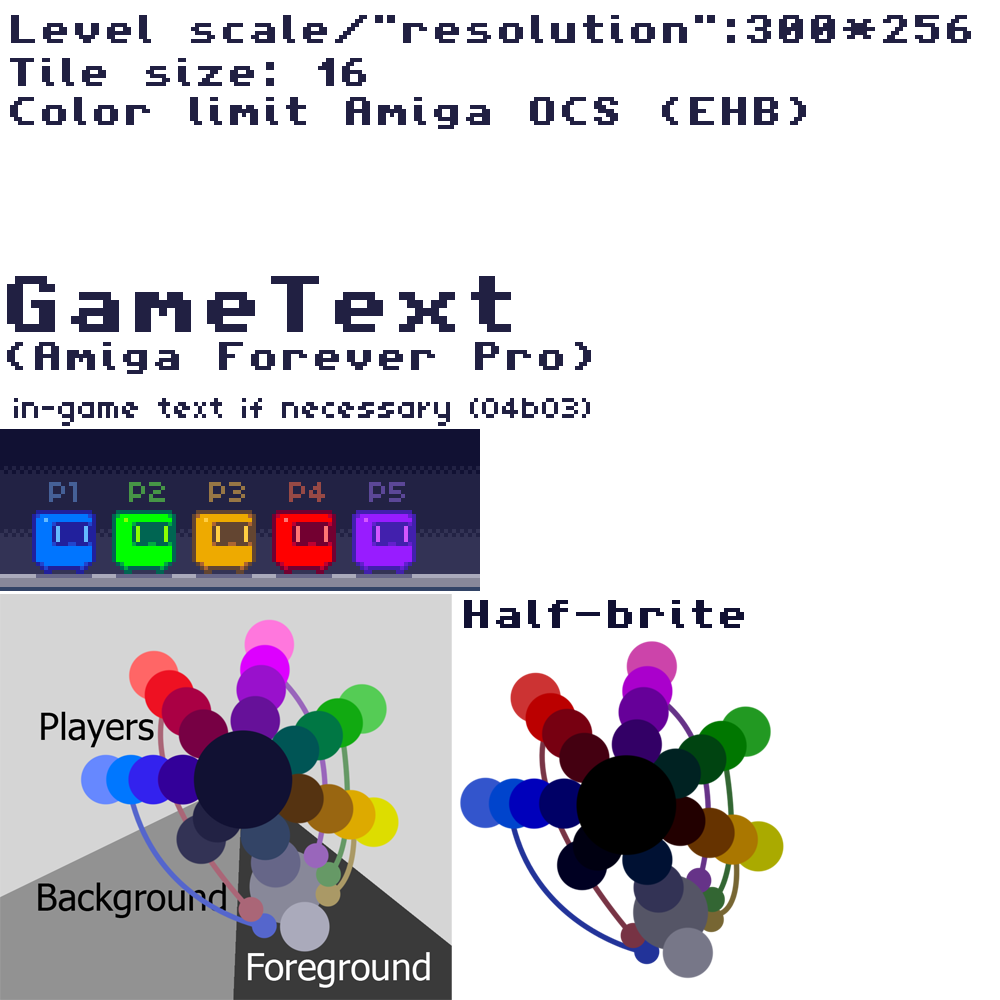
<style>
.page{position:relative;width:1000px;height:1000px;background:#ffffff}
.page>*{position:absolute;margin:0}
.t1{font:32px "AmigaForeverPro";color:#212042}
.t2{font:64px "AmigaForeverPro";color:#212042}
.t3{font:32px "04b03";color:#212042}
.t4{font:32px "04b03";color:#456097}
.t5{font:32px "04b03";color:#469546}
.t6{font:32px "04b03";color:#977645}
.t7{font:32px "04b03";color:#974945}
.t8{font:32px "04b03";color:#5b4797}
.t9{font:32px "AmigaForeverPro";color:#111133}
</style>
<div class="page">
<p class="t1" style="left:11px;top:15px;width:960px;height:28px">Level scale/"resolution":300*256</p>
<p class="t1" style="left:10px;top:58px;width:796px;height:71px">Tile size: 16<br>Color limit Amiga OCS (EHB)</p>
<p class="t1" style="left:7px;top:276px;width:584px;height:98px"><span class="t2">GameText</span><br>(Amiga Forever Pro)</p>
<p class="t3" style="left:14px;top:398px;width:576px;height:28px">in-game text if necessary (04b03)</p>
<p class="t4" style="left:49px;top:482px;width:28px;height:20px">P1</p>
<p class="t5" style="left:129px;top:482px;width:36px;height:20px">P2</p>
<p class="t6" style="left:209px;top:482px;width:36px;height:20px">P3</p>
<p class="t7" style="left:289px;top:482px;width:36px;height:20px">P4</p>
<p class="t8" style="left:369px;top:482px;width:36px;height:20px">P5</p>
<p class="t9" style="left:464px;top:600px;width:280px;height:28px">Half-brite</p>
</div>
